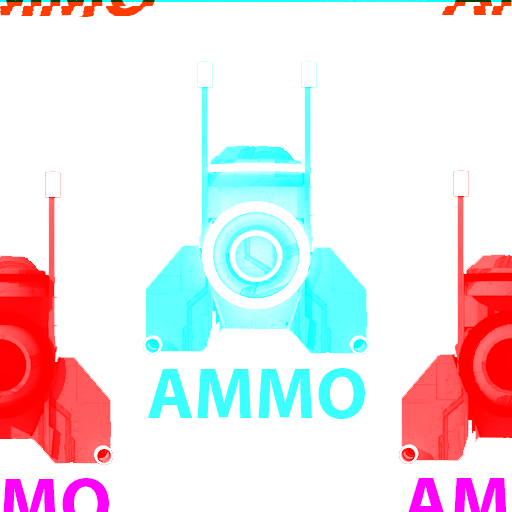
<style>
.page{position:relative;width:512px;height:512px;background:#ffffff}
.page>*{position:absolute;margin:0}
.t1{font:72px "MyriadPro-Bold";color:#3cffff}
</style>
<div class="page">
<p class="t1" style="left:148px;top:366px;width:217px;height:51px">AMMO</p>
</div>
